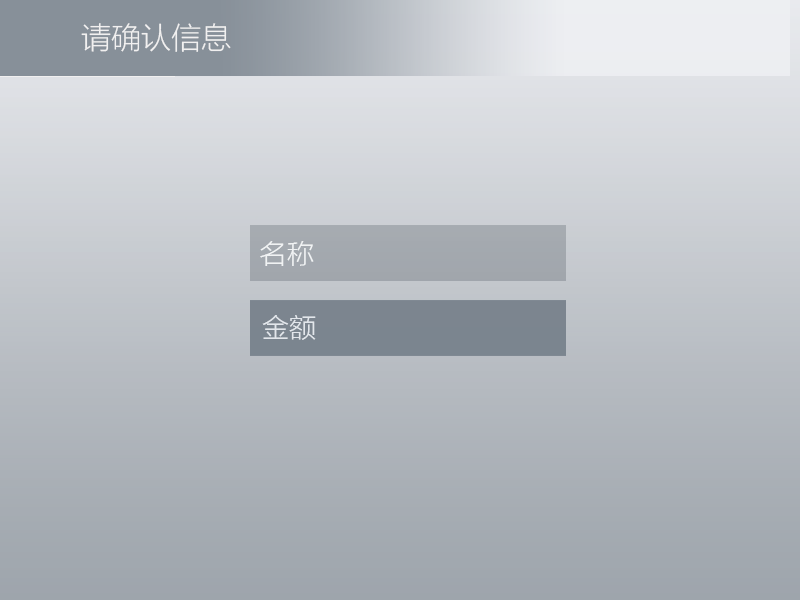
<style>
.page{position:relative;width:800px;height:600px}
.page>*{position:absolute;margin:0}
.t1{font:30px "MicrosoftYaHeiLight";color:#f1f0f0}
.t2{font:27.1px "MicrosoftYaHeiLight";color:#f0f2f3}
.t3{font:27.1px "MicrosoftYaHeiLight";color:#e2e6eb}
</style>
<div class="page">
<p class="t1" style="left:81px;top:23px;width:150px;height:29px">请确认信息</p>
<p class="t2" style="left:260px;top:241px;width:54px;height:25px">名称</p>
<p class="t3" style="left:262px;top:315px;width:54px;height:25px">金额</p>
</div>
